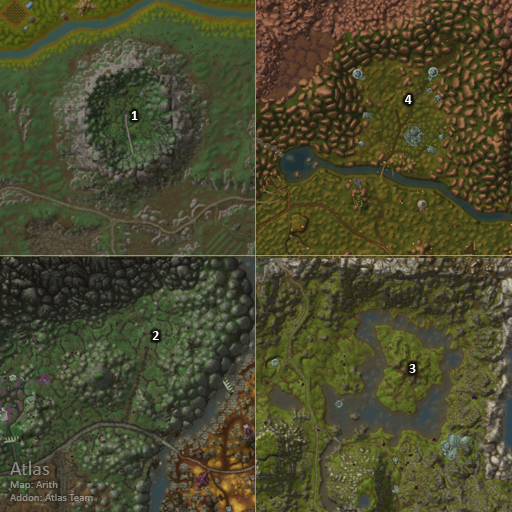
<style>
.page{position:relative;width:512px;height:512px}
.page>*{position:absolute;margin:0}
.t1{font:14px "Calibri-Bold";color:#ffffff}
.t2{font:11px "Calibri";color:#8d8c84}
.t3{font:20px "Calibri";color:#8d8c84}
</style>
<div class="page">
<p class="t1" style="left:404px;top:95px;width:8px;height:9px">4</p>
<p class="t1" style="left:131px;top:111px;width:7px;height:9px">1</p>
<p class="t1" style="left:152px;top:331px;width:7px;height:9px">2</p>
<p class="t1" style="left:409px;top:364px;width:7px;height:9px">3</p>
<p class="t2" style="left:10px;top:461px;width:83px;height:40px"><span class="t3">Atlas<br></span>Map: Arith<br>Addon: Atlas Team</p>
</div>
